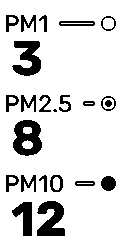
<style>
.page{position:relative;width:122px;height:250px;background:#ffffff}
.page>*{position:absolute;margin:0}
.t1{font:24px "Rubik-Regular";color:#000000}
.t2{font:49px "Rubik-Bold";color:#000000}
</style>
<div class="page">
<p class="t1" style="left:6px;top:15px;width:41px;height:17px">PM1</p>
<p class="t2" style="left:12px;top:40px;width:30px;height:36px">3</p>
<p class="t1" style="left:6px;top:94px;width:66px;height:19px">PM2.5</p>
<p class="t2" style="left:13px;top:120px;width:29px;height:36px">8</p>
<p class="t1" style="left:6px;top:174px;width:57px;height:19px">PM10</p>
<p class="t2" style="left:11px;top:201px;width:54px;height:35px">12</p>
</div>
